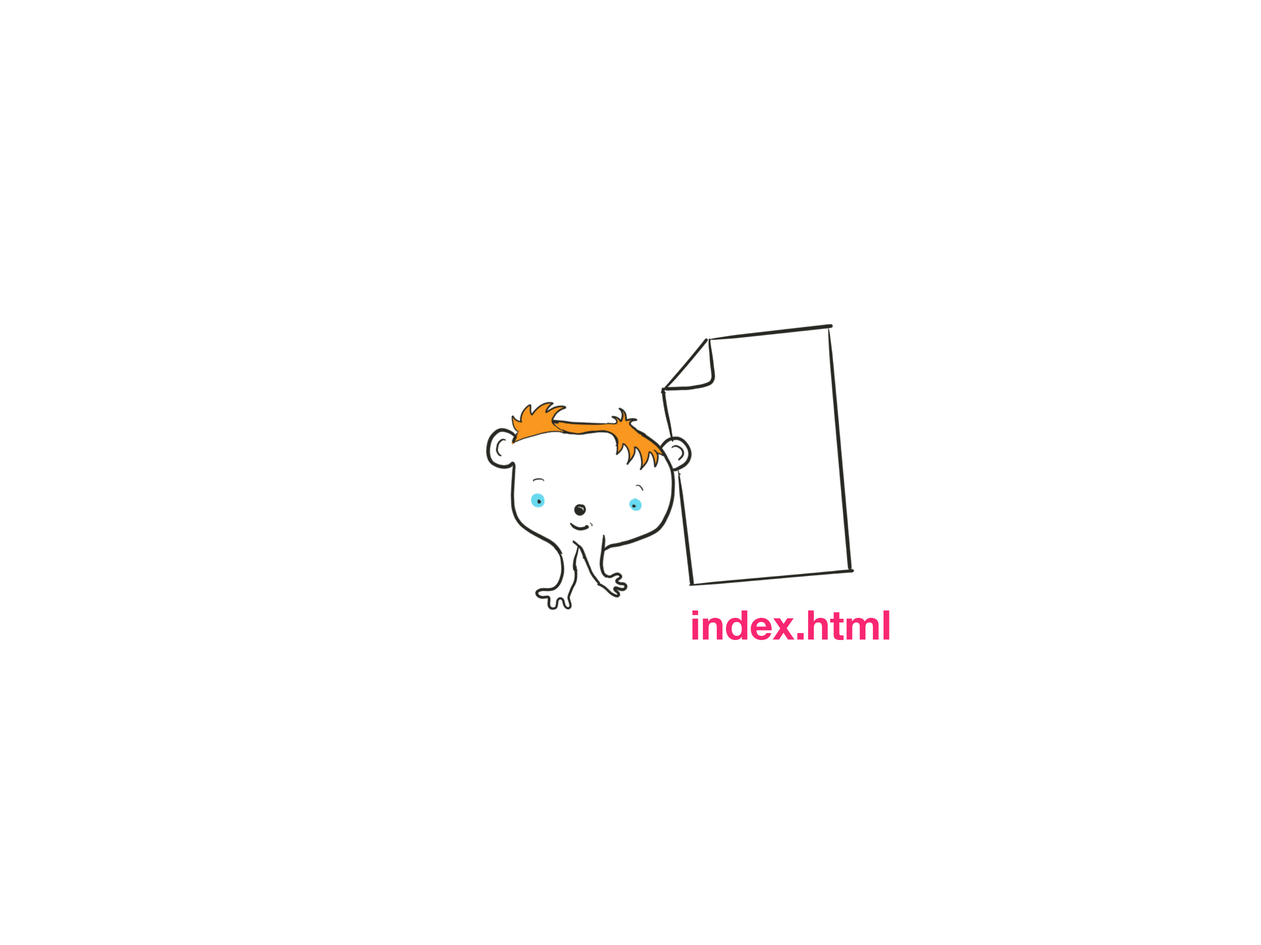
<style>
.page{position:relative;width:1261px;height:945px;background:#ffffff}
.page>*{position:absolute;margin:0}
.t1{font:40.6px "HelveticaNeue-Bold";color:#f92672}
</style>
<div class="page">
<p class="t1" style="left:692px;top:611px;width:198px;height:29px">index.html</p>
</div>
